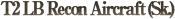
<style>
.page{position:relative;width:175px;height:19px;background:#ffffff}
.page>*{position:absolute;margin:0}
.t1{font:18px "RyuminPro-ExBold";letter-spacing:-0.12em;color:#4a3f32;font-weight:bold;scale:0.9 1}
</style>
<div class="page">
<p class="t1" style="left:0px;top:1px;width:175px;height:18px">T2 LB Recon Aircraft (Sk.)</p>
</div>
